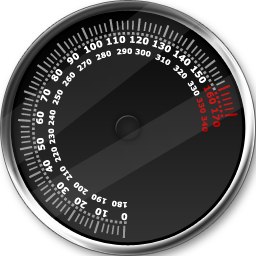
<style>
.page{position:relative;width:256px;height:256px}
.page>*{position:absolute;margin:0}
.t1{font:9.1px "Verdana-Bold";color:#ffffff}
.t2{font:9.1px "Verdana-Bold";color:#bc0101}
.t3{font:7.3px "Verdana-Bold";color:#ffffff}
.t4{font:7.3px "Verdana-Bold";color:#bc0101}
</style>
<div class="page">
<p class="t1" style="left:36px;top:36px;width:185px;height:185px">0    10   20   30    40   50    60   70   80   90  100 110 120 130 140 150 <span class="t2">160 170</span></p>
<p class="t3" style="left:48px;top:48px;width:160px;height:160px">180  190  200  210  220 230 240  250  260  270  280  290 300  310  320  330 <span class="t4">330 340</span></p>
</div>
